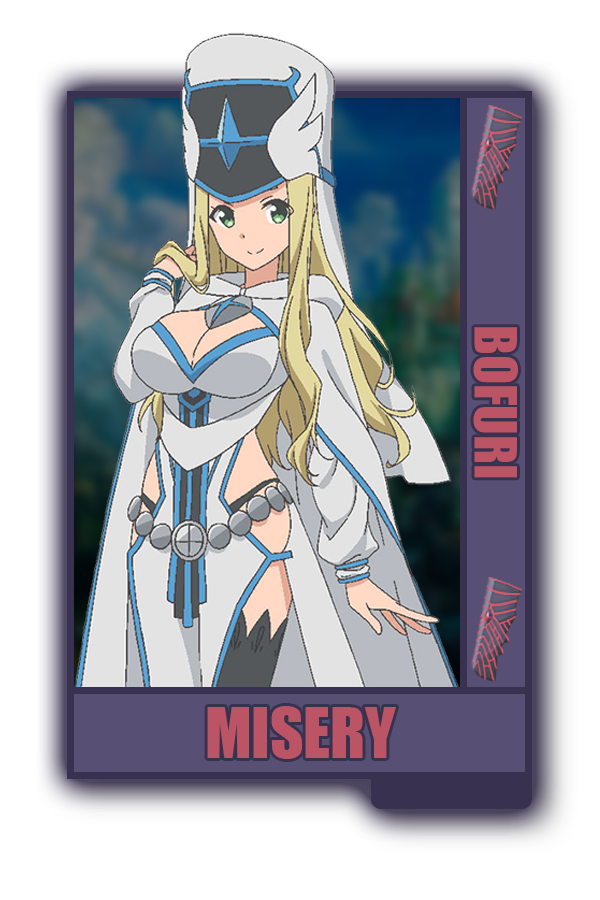
<style>
.page{position:relative;width:600px;height:900px;background:#ffffff}
.page>*{position:absolute;margin:0}
.t1{font:53.6px "Impact";color:#bb5464}
.t2{font:64.6px "Impact";color:#bb5464}
</style>
<div class="page">
<p class="t1" style="left:473px;top:327px;width:45px;height:151px;rotate:90deg">BOFURI</p>
<p class="t2" style="left:207px;top:706px;width:189px;height:53px">MISERY</p>
</div>
